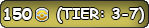
<style>
.page{position:relative;width:149px;height:28px}
.page>*{position:absolute;margin:0}
.t1{font:12px "ComicSansMS-Bold";color:#ffffff}
.t2{font:14.7px "ComicSansMS-Bold";color:#ffffff}
</style>
<div class="page">
<p class="t1" style="left:4px;top:8px;width:28px;height:12px">150</p>
<p class="t2" style="left:57px;top:7px;width:87px;height:16px">(TIER: 3-7)</p>
</div>
